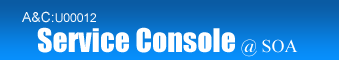
<style>
.page{position:relative;width:339px;height:60px}
.page>*{position:absolute;margin:0}
.t1{font:30px "Impact";color:#ffffff}
.t2{font:18px "TimesNewRomanPSMT";color:#ffffff}
</style>
<div class="page">
<p class="t1" style="left:37px;top:27px;width:261px;height:30px">Service Console<span class="t2"> @ SOA</span></p>
</div>
